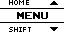
<style>
.page{position:relative;width:64px;height:32px;background:#ffffff}
.page>*{position:absolute;margin:0}
.t1{font:8px "04b03";color:#000000;scale:1.06 1}
.t2{font:14px "ArcadeClassic";color:#000000;scale:1.05 1}
</style>
<div class="page">
<p class="t1" style="left:9px;top:0px;width:20px;height:5px">HOME</p>
<p class="t2" style="left:17px;top:12px;width:31px;height:7px">MENU</p>
<p class="t1" style="left:9px;top:27px;width:22px;height:5px">SHIFT</p>
</div>
